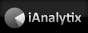
<style>
.page{position:relative;width:88px;height:33px;background:#000000}
.page>*{position:absolute;margin:0}
.t1{font:14.6px "Calibri-Bold"}
</style>
<div class="page">
<p class="t1" style="left:28px;top:12px;width:54px;height:13px">iAnalytix</p>
</div>
